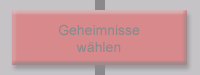
<style>
.page{position:relative;width:200px;height:75px;background:#d7898b}
.page>*{position:absolute;margin:0}
.t1{font:14px "ArialMT";color:#8b898b}
</style>
<div class="page">
<p class="t1" style="left:59px;top:24px;width:81px;height:28px;text-align:center">Geheimnisse<br>wählen</p>
</div>
